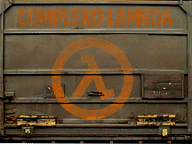
<style>
.page{position:relative;width:192px;height:144px}
.page>*{position:absolute;margin:0}
.t1{font:23.4px "Tahoma-Bold";letter-spacing:-0.04em;color:#b55204;text-transform:uppercase;scale:0.69 1}
</style>
<div class="page">
<p class="t1" style="left:17px;top:9px;width:156px;height:17px">COMPLEXO LAMBDA</p>
</div>
